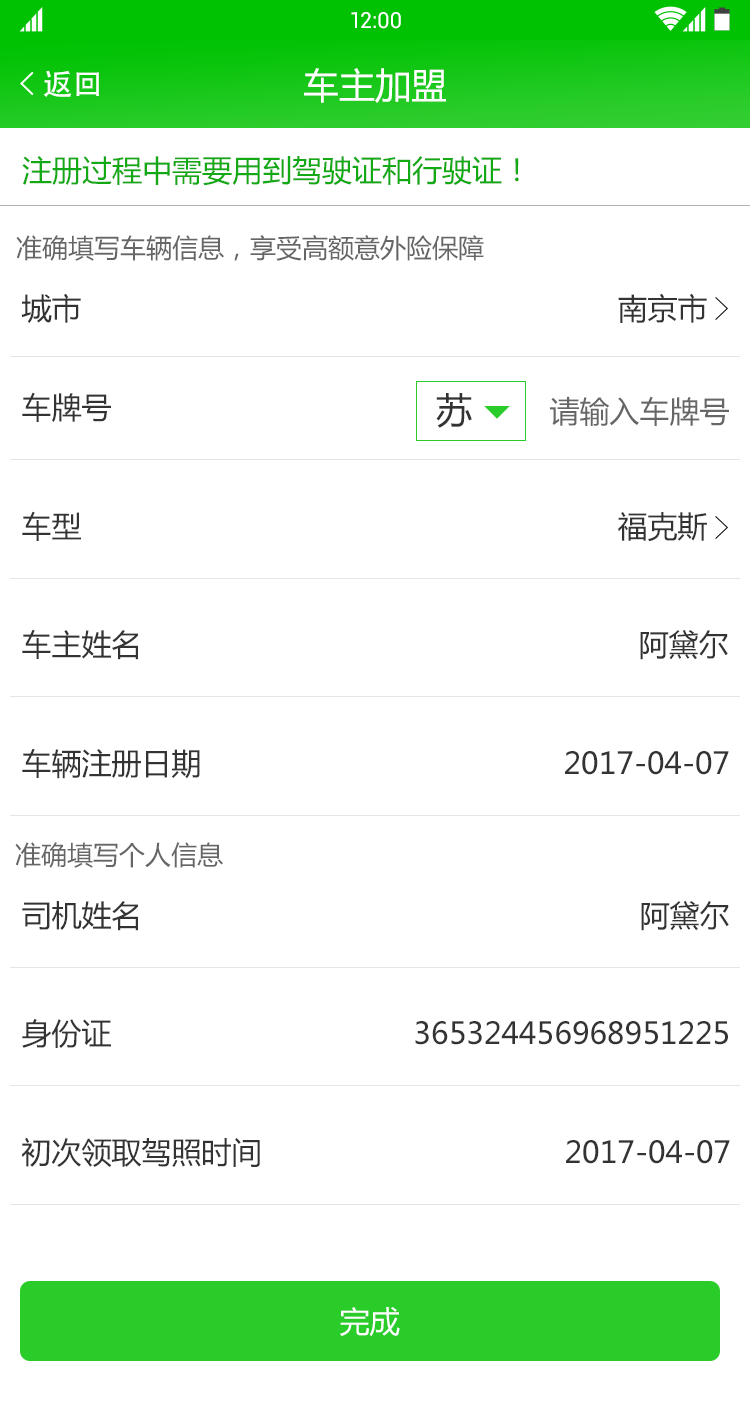
<style>
.page{position:relative;width:750px;height:1417px;background:#ffffff}
.page>*{position:absolute;margin:0}
.t1{font:22px "Roboto-Regular";color:#ffffff}
.t2{font:30px "AdobeHeitiStd-Regular";color:#ffffff}
.t3{font:36px "MicrosoftYaHei";color:#ffffff}
.t4{font:30px "MicrosoftYaHei";color:#13a915}
.t5{font:26px "MicrosoftYaHei";color:#666666}
.t6{font:30px "MicrosoftYaHei";color:#333333}
.t7{font:36px "MicrosoftYaHei";color:#333333}
.t8{font:30px "MicrosoftYaHei";color:#666666}
.t9{font:30px "MicrosoftYaHei";color:#ffffff}
</style>
<div class="page">
<p class="t1" style="left:351px;top:12px;width:50px;height:17px">12:00</p>
<p class="t2" style="left:43px;top:70px;width:56px;height:27px">返回</p>
<p class="t3" style="left:304px;top:68px;width:142px;height:35px">车主加盟</p>
<p class="t4" style="left:22px;top:156px;width:497px;height:30px">注册过程中需要用到驾驶证和行驶证！</p>
<p class="t5" style="left:16px;top:235px;width:468px;height:26px">准确填写车辆信息，享受高额意外险保障</p>
<p class="t6" style="left:21px;top:293px;width:60px;height:30px">城市</p>
<p class="t6" style="left:618px;top:293px;width:89px;height:30px">南京市</p>
<p class="t6" style="left:22px;top:392px;width:89px;height:30px">车牌号</p>
<p class="t7" style="left:436px;top:393px;width:36px;height:35px">苏</p>
<p class="t8" style="left:550px;top:396px;width:179px;height:30px">请输入车牌号</p>
<p class="t6" style="left:22px;top:511px;width:59px;height:30px">车型</p>
<p class="t6" style="left:618px;top:512px;width:89px;height:30px">福克斯</p>
<p class="t6" style="left:22px;top:629px;width:116px;height:31px">车主姓名</p>
<p class="t6" style="left:640px;top:630px;width:88px;height:30px">阿黛尔</p>
<p class="t6" style="left:22px;top:748px;width:178px;height:31px">车辆注册日期</p>
<p class="t6" style="left:565px;top:751px;width:164px;height:24px">2017-04-07</p>
<p class="t5" style="left:15px;top:842px;width:208px;height:26px">准确填写个人信息</p>
<p class="t6" style="left:22px;top:901px;width:116px;height:30px">司机姓名</p>
<p class="t6" style="left:641px;top:901px;width:88px;height:30px">阿黛尔</p>
<p class="t6" style="left:22px;top:1019px;width:89px;height:29px">身份证</p>
<p class="t6" style="left:415px;top:1021px;width:313px;height:24px">365324456968951225</p>
<p class="t6" style="left:21px;top:1137px;width:239px;height:30px">初次领取驾照时间</p>
<p class="t6" style="left:566px;top:1140px;width:164px;height:24px">2017-04-07</p>
<p class="t9" style="left:340px;top:1307px;width:60px;height:29px">完成</p>
</div>
